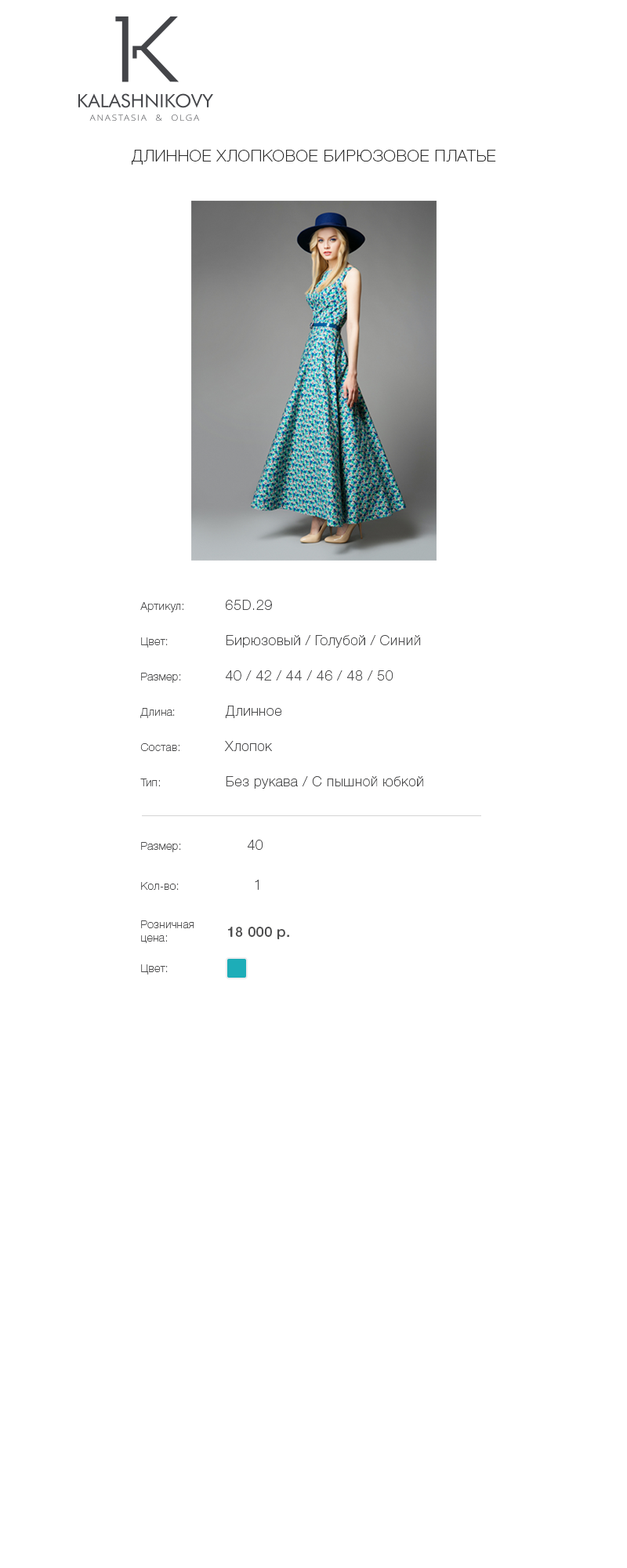
<style>
.page{position:relative;width:627px;height:1568px;background:#ffffff}
.page>*{position:absolute;margin:0}
.t1{font:16.5px "HelveticaNeueCyr-Thin";letter-spacing:0.03em;color:#2b2b2b;text-transform:uppercase}
.t2{font:14.1px/35.3px "HelveticaNeueCyr-Thin";letter-spacing:0.03em;color:#4d4d4e}
.t3{font:11px/35.3px "HelveticaNeueCyr-Thin";letter-spacing:0.03em;color:#4d4d4e}
.t4{font:11px "HelveticaNeueCyr-Thin";letter-spacing:0.03em;color:#4d4d4e}
.t5{font:14.1px "HelveticaNeueCyr-Thin";letter-spacing:0.03em;color:#4d4d4e}
.t6{font:14.1px "HelveticaNeueCyr-Medium";letter-spacing:0.03em;color:#4d4d4e}
</style>
<div class="page">
<p class="t1" style="left:132px;top:150px;width:364px;height:15px">Длинное хлопковое бирюзовое платье</p>
<p class="t2" style="left:140px;top:600px;width:283px;height:189px"><span class="t3">Артикул:</span>   65D.29<br><span class="t3">Цвет:</span>   Бирюзовый / Голубой / Синий<br><span class="t3">Размер:</span>   40 / 42 / 44 / 46 / 48 / 50<br><span class="t3">Длина:</span>   Длинное<br><span class="t3">Состав:</span>   Хлопок<br><span class="t3">Тип:</span>    Без рукава / С пышной юбкой</p>
<p class="t4" style="left:141px;top:840px;width:122px;height:12px">Размер:<span class="t5">            40</span></p>
<p class="t4" style="left:141px;top:880px;width:118px;height:11px">Кол-во:<span class="t5">           1</span></p>
<p class="t4" style="left:141px;top:920px;width:53px;height:23px">Розничная<br>цена:</p>
<p class="t6" style="left:227px;top:927px;width:62px;height:12px">18 000 р.</p>
<p class="t4" style="left:141px;top:964px;width:27px;height:11px">Цвет:</p>
</div>
